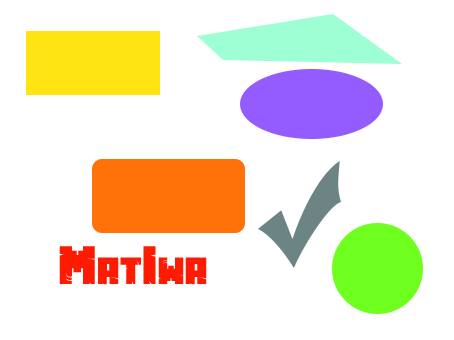
<style>
.page{position:relative;width:454px;height:340px;background:#ffffff}
.page>*{position:absolute;margin:0}
.t1{font:48px "MinecrafterAlt";color:#ff1a02;font-variant:small-caps}
</style>
<div class="page">
<p class="t1" style="left:59px;top:246px;width:148px;height:39px">MatIwa</p>
</div>
